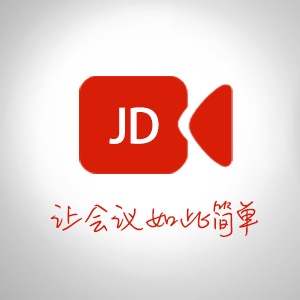
<style>
.page{position:relative;width:300px;height:300px}
.page>*{position:absolute;margin:0}
.t1{font:46.3px "AdobeHeitiStd-Regular";letter-spacing:-0.02em;color:#ffffff}
.t2{font:41.7px "MLingWaiMedium-SC";letter-spacing:-0.02em;color:#d81e06}
</style>
<div class="page">
<p class="t1" style="left:109px;top:107px;width:50px;height:37px">JD</p>
<p class="t2" style="left:50px;top:200px;width:208px;height:37px">让会议如此简单</p>
</div>
